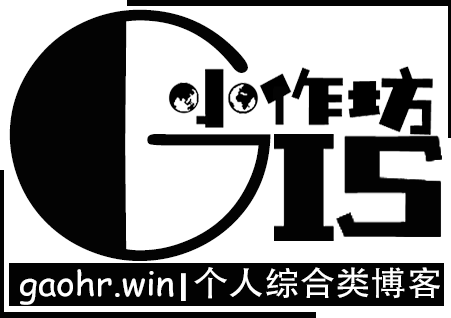
<style>
.page{position:relative;width:451px;height:318px;background:#ffffff}
.page>*{position:absolute;margin:0}
.t1{font:355.4px "Broadway";color:#030303;scale:1.03 1}
.t2{font:33.6px "ComicSansMS";color:#ffffff;scale:1.06 1}
.t3{font:33.6px "Broadway";color:#ffffff;scale:1.06 1}
.t4{font:33.6px "AdobeHeitiStd-Regular";color:#ffffff;scale:1.06 1}
</style>
<div class="page">
<p class="t1" style="left:9px;top:9px;width:262px;height:252px">G</p>
<p class="t2" style="left:20px;top:267px;width:420px;height:38px">gaohr.win<span class="t3">|</span><span class="t4">个人综合类博客</span></p>
</div>
